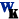
<style>
.page{position:relative;width:19px;height:19px;background:#ffffff}
.page>*{position:absolute;margin:0}
.t1{font:14px "STIXGeneral-Bold";letter-spacing:-0.14em;color:#00258f;font-weight:bold}
.t2{font:14px "Stencil";letter-spacing:-0.14em;color:#000000;font-weight:bold}
</style>
<div class="page">
<p class="t1" style="left:0px;top:2px;width:15px;height:11px">W</p>
<p class="t2" style="left:8px;top:9px;width:11px;height:10px">K</p>
</div>
